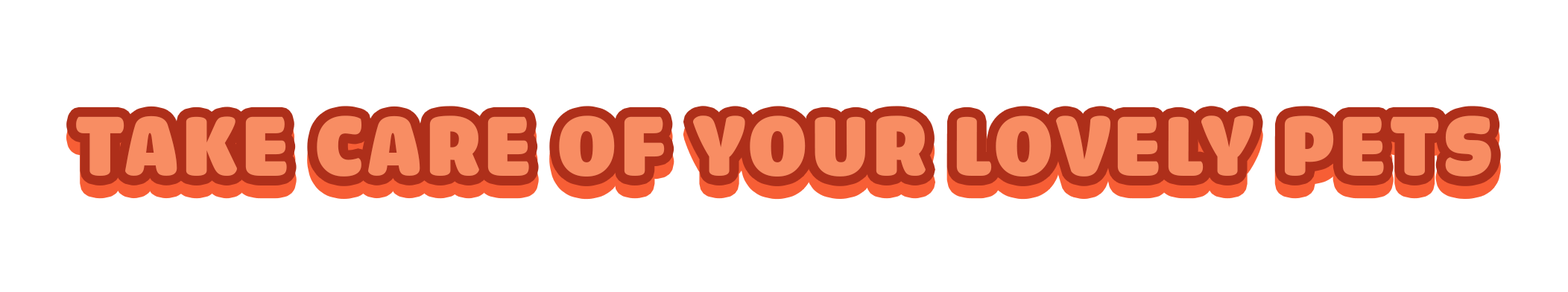
<style>
.page{position:relative;width:1568px;height:292px;background:#ffffff}
.page>*{position:absolute;margin:0}
.t1{font:89.4px "iCielCadena";letter-spacing:0.05em;color:#f88d63;text-transform:uppercase}
</style>
<div class="page">
<p class="t1" style="left:76px;top:116px;width:1415px;height:61px">TAKE CARE OF YOUR lovely PETs</p>
</div>
